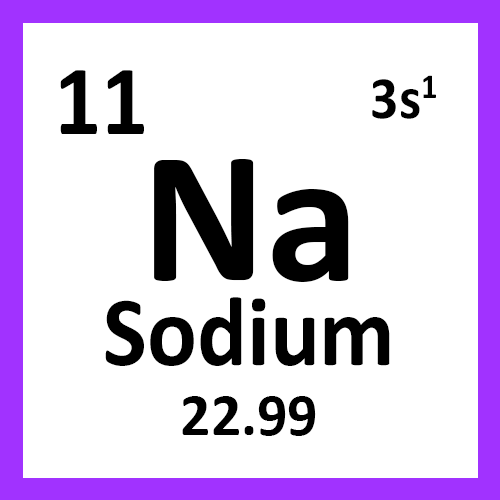
<style>
.page{position:relative;width:500px;height:500px;background:#ffffff}
.page>*{position:absolute;margin:0}
.t1{font:100px "Calibri-Bold";color:#000000;scale:0.93 1}
.t2{font:60px "Calibri-Bold";color:#000000;scale:0.93 1}
.t3{font:190px "Calibri-Bold";color:#000000}
.t4{font:60px "Calibri-Bold";color:#000000}
</style>
<div class="page">
<p class="t1" style="left:60px;top:70px;width:84px;height:64px">11</p>
<p class="t2" style="left:372px;top:75px;width:64px;height:44px">3s1</p>
<p class="t3" style="left:154px;top:159px;width:195px;height:123px">Na</p>
<p class="t1" style="left:105px;top:297px;width:285px;height:69px">Sodium</p>
<p class="t4" style="left:182px;top:396px;width:134px;height:40px">22.99</p>
</div>
